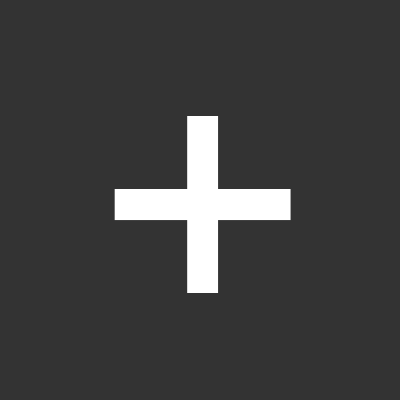
<style>
.page{position:relative;width:400px;height:400px;background:#333333}
.page>*{position:absolute;margin:0}
.t1{font:372px "ArialMT";letter-spacing:-0.025em;color:#ffffff}
</style>
<div class="page">
<p class="t1" style="left:114px;top:116px;width:177px;height:177px">+</p>
</div>
